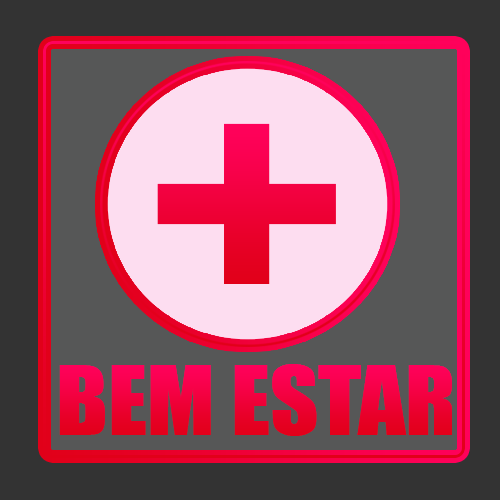
<style>
.page{position:relative;width:500px;height:500px;background:#565757}
.page>*{position:absolute;margin:0}
.t1{font:338.5px "Impact";color:#f0003a;scale:1.12 1}
.t2{font:88.1px "Impact";scale:1.07 1}
</style>
<div class="page">
<p class="t1" style="left:157px;top:123px;width:179px;height:161px">+</p>
<p class="t2" style="left:59px;top:364px;width:393px;height:72px">BEM ESTAR</p>
</div>
